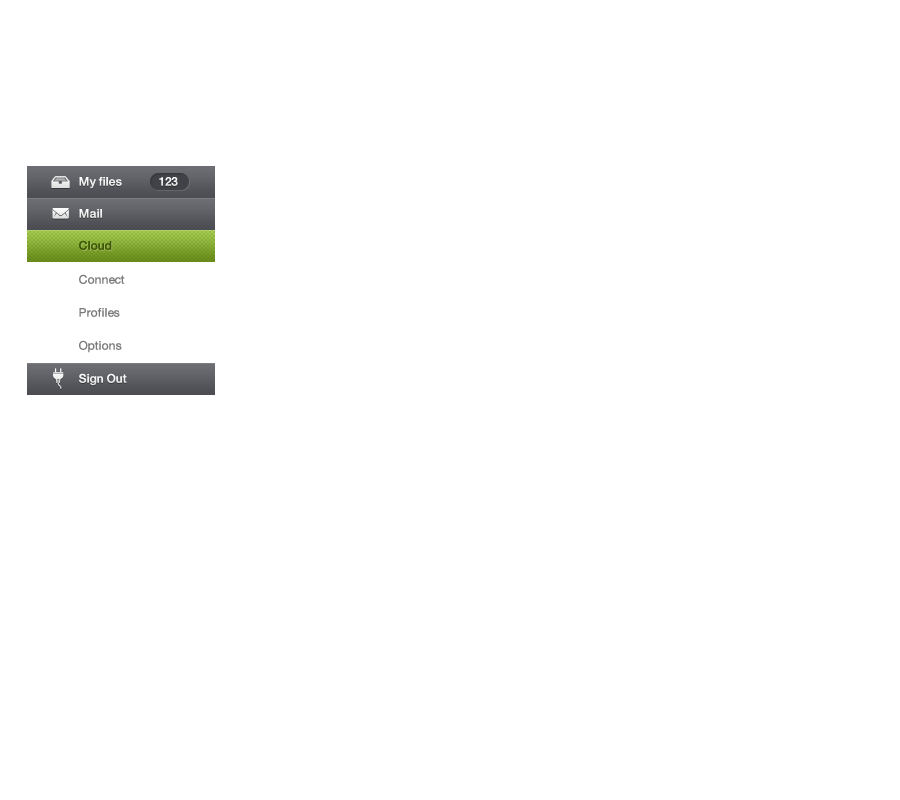
<style>
.page{position:relative;width:900px;height:800px;background:#ffffff}
.page>*{position:absolute;margin:0}
.t1{font:12px "HelveticaNeue-Medium";color:#f0f0f0}
.t2{font:12px "HelveticaNeue-Medium";letter-spacing:-0.06em;color:#f0f0f0}
.t3{font:12px "HelveticaNeue-Medium";color:#3e5706}
.t4{font:12px/33px "HelveticaNeue";color:#797979}
.t5{font:12px "HelveticaNeue-Medium";color:#f4f4f4}
</style>
<div class="page">
<p class="t1" style="left:79px;top:177px;width:43px;height:12px">My files</p>
<p class="t2" style="left:159px;top:177px;width:19px;height:9px">123</p>
<p class="t1" style="left:79px;top:209px;width:23px;height:9px">Mail</p>
<p class="t3" style="left:79px;top:240px;width:33px;height:10px">Cloud</p>
<p class="t4" style="left:79px;top:274px;width:46px;height:79px">Connect<br>Profiles<br>Options</p>
<p class="t5" style="left:79px;top:373px;width:48px;height:13px">Sign Out</p>
</div>
